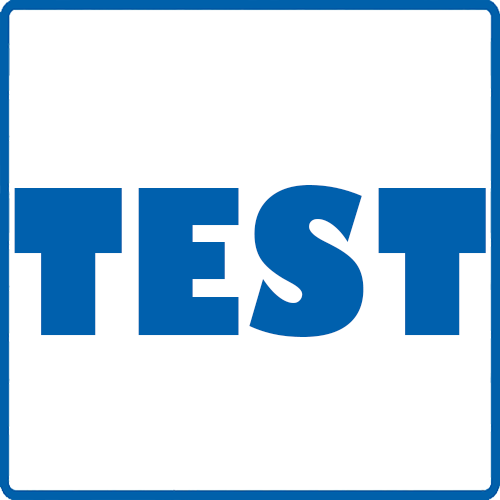
<style>
.page{position:relative;width:500px;height:500px;background:#ffffff}
.page>*{position:absolute;margin:0}
.t1{font:200px "Humanist521BT-UltraBold";color:#0060ad;scale:0.82 1}
</style>
<div class="page">
<p class="t1" style="left:14px;top:185px;width:472px;height:152px">TEST</p>
</div>
